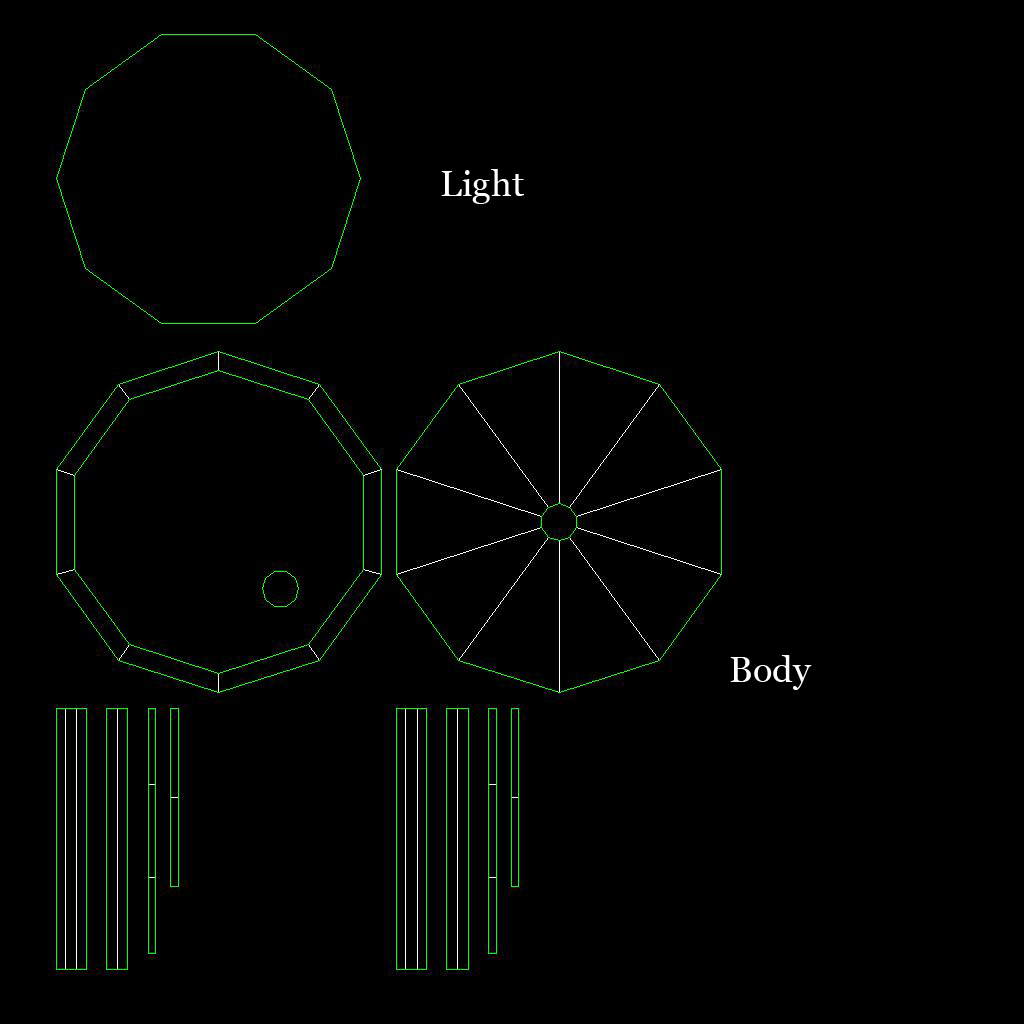
<style>
.page{position:relative;width:1024px;height:1024px;background:#000000}
.page>*{position:absolute;margin:0}
.t1{font:36px "Georgia";color:#ffffff}
</style>
<div class="page">
<p class="t1" style="left:441px;top:169px;width:83px;height:35px">Light</p>
<p class="t1" style="left:730px;top:655px;width:82px;height:35px">Body</p>
</div>
